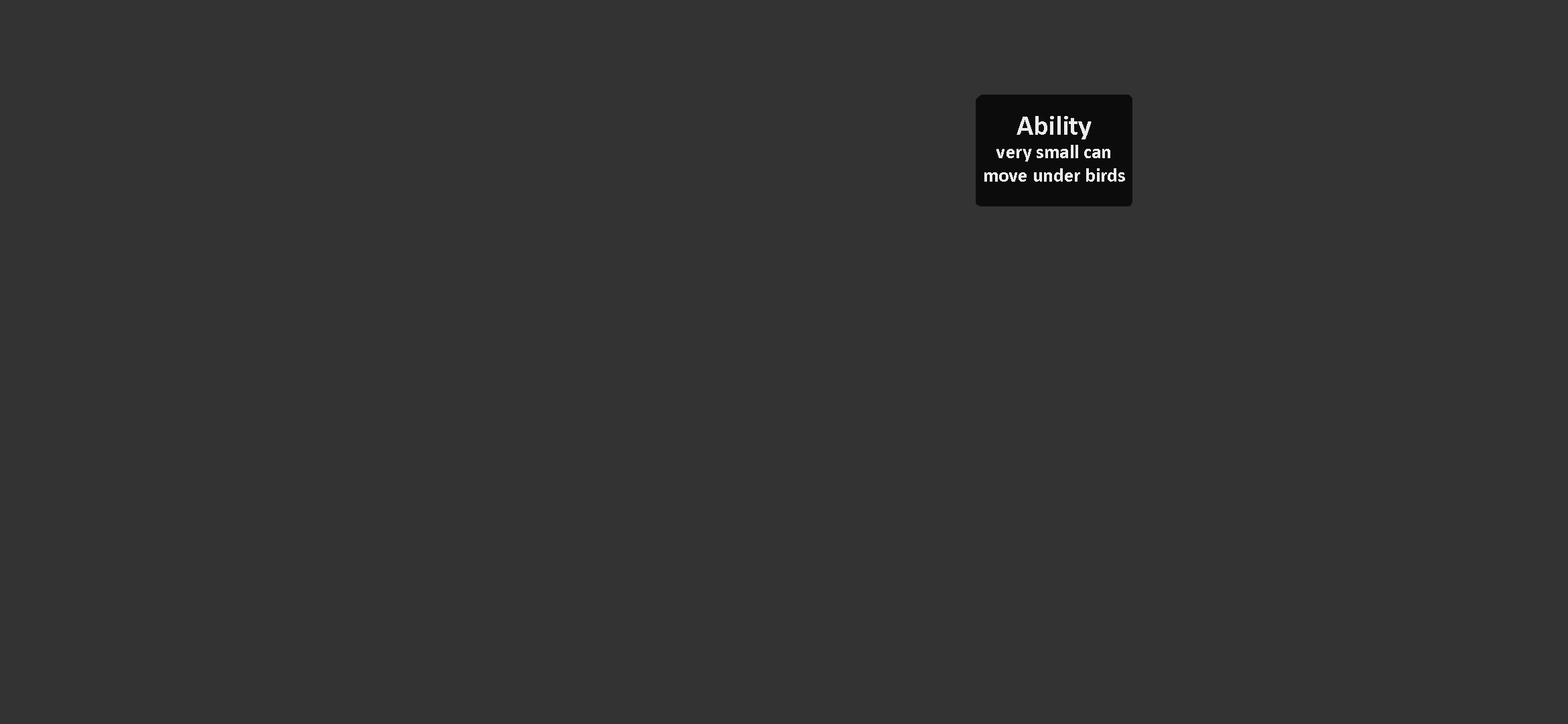
<style>
.page{position:relative;width:1568px;height:724px;background:#333333}
.page>*{position:absolute;margin:0}
.t1{font:19.5px "Calibri-Bold";color:#ffffff}
.t2{font:27.9px "Calibri-Bold";color:#ffffff}
</style>
<div class="page">
<p class="t1" style="left:984px;top:116px;width:141px;height:66px;text-align:center;opacity:0.89"><span class="t2">Ability<br></span>very small can <br>move under birds</p>
</div>
